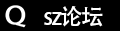
<style>
.page{position:relative;width:120px;height:31px;background:#000000}
.page>*{position:absolute;margin:0}
.t1{font:22.1px "AdobeHeitiStd-Regular";letter-spacing:-0.06em;color:#ffffff}
</style>
<div class="page">
<p class="t1" style="left:44px;top:6px;width:59px;height:21px">sz论坛</p>
</div>
